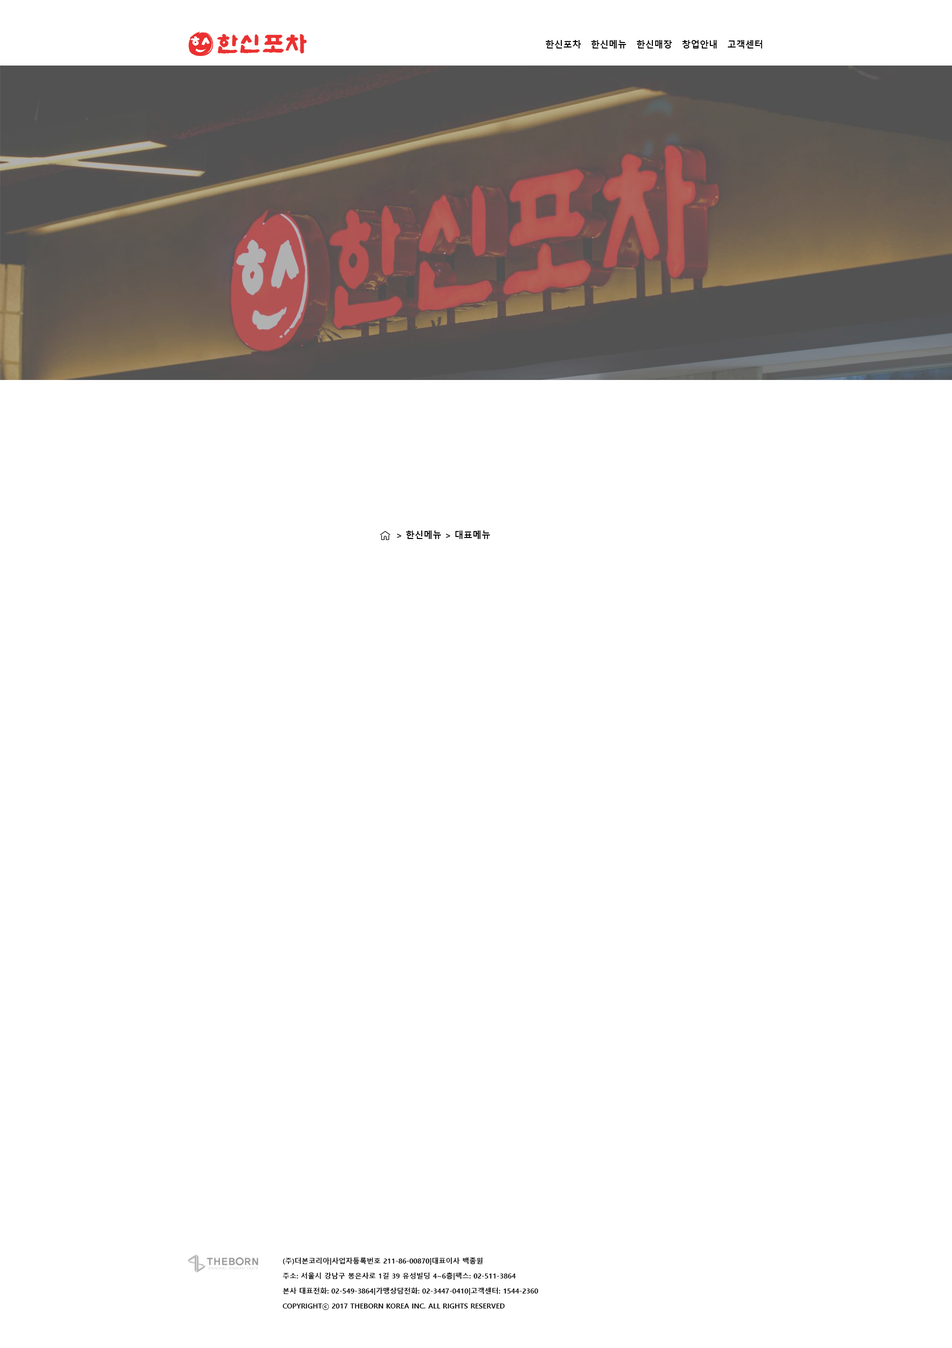
<style>
.page{position:relative;width:952px;height:1348px;background:#ffffff}
.page>*{position:absolute;margin:0}
.t1{font:9px "MalgunGothicBold";color:#000000}
.t2{font:7px "MalgunGothicBold";color:#ffffff}
.t3{font:7px/15px "MalgunGothicBold";color:#000000}
</style>
<div class="page">
<p class="t1" style="left:538px;top:40px;width:224px;height:8px"><span class="t2">한</span>한신포차   한신메뉴   한신매장   창업안내   고객센터</p>
<p class="t1" style="left:396px;top:530px;width:94px;height:9px">&gt; 한신메뉴 &gt; 대표메뉴</p>
<p class="t3" style="left:282px;top:1258px;width:256px;height:52px">(주)더본코리아|사업자등록번호 211-86-00870|대표이사 백종원<br>주소: 서울시 강남구 봉은사로 1길 39 유성빌딩 4~6층|팩스: 02-511-3864<br>본사 대표전화: 02-549-3864|가맹상담전화: 02-3447-0410|고객센터: 1544-2360<br>COPYRIGHTⓒ 2017 THEBORN KOREA INC. ALL RIGHTS RESERVED</p>
</div>
